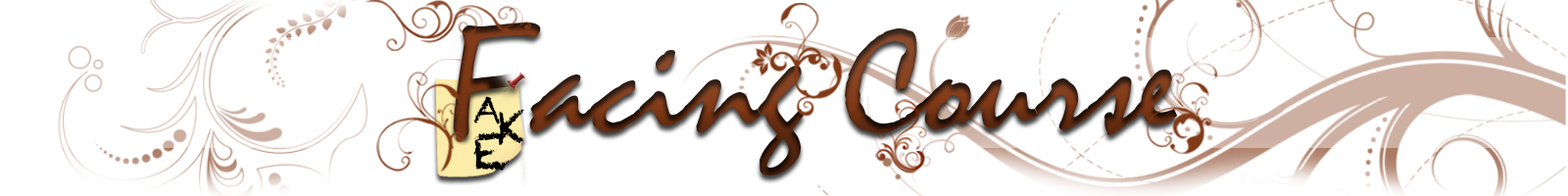
<style>
.page{position:relative;width:1568px;height:196px;background:#ffffff}
.page>*{position:absolute;margin:0}
.t1{font:150.8px "SegoePrint";scale:1.05 1}
.t2{font:150.8px "Mistral";scale:1.05 1}
.t3{font:36.6px "Chalkduster";color:#000000}
.t4{font:43.1px "Chalkduster";color:#000000}
.t5{font:51px "Chalkduster";color:#000000}
</style>
<div class="page">
<p class="t1" style="left:453px;top:23px;width:88px;height:114px">F</p>
<p class="t2" style="left:529px;top:28px;width:649px;height:147px">acing Course</p>
<p class="t3" style="left:474px;top:96px;width:26px;height:28px">A</p>
<p class="t4" style="left:498px;top:109px;width:26px;height:36px">K</p>
<p class="t5" style="left:473px;top:131px;width:37px;height:40px">E</p>
</div>
